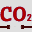
<style>
.page{position:relative;width:32px;height:32px;background:#dfdfdf}
.page>*{position:absolute;margin:0}
.t1{font:20px "CantoraOne-Regular";color:#af0000;font-weight:bold}
.t2{font:10px "CantoraOne-Regular";color:#af0000;font-weight:bold}
</style>
<div class="page">
<p class="t1" style="left:0px;top:6px;width:32px;height:16px">CO<span class="t2">2</span></p>
<p class="t1" style="left:0px;top:6px;width:32px;height:16px">CO<span class="t2">2</span></p>
</div>
